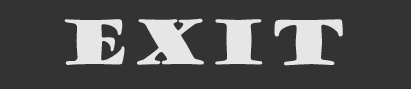
<style>
.page{position:relative;width:411px;height:89px;background:#333333}
.page>*{position:absolute;margin:0}
.t1{font:60px "GoudyStout";color:#e6e6e6}
</style>
<div class="page">
<p class="t1" style="left:64px;top:18px;width:279px;height:48px">EXIT</p>
</div>
